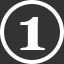
<style>
.page{position:relative;width:64px;height:64px;background:#333333}
.page>*{position:absolute;margin:0}
.t1{font:60px "Georgia-Bold";color:#fffefe}
</style>
<div class="page">
<p class="t1" style="left:20px;top:17px;width:25px;height:33px">1</p>
</div>
